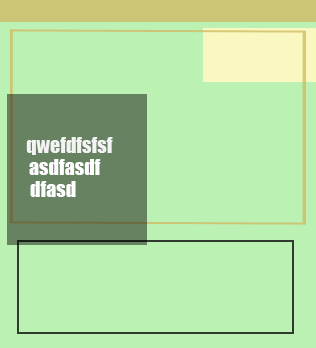
<style>
.page{position:relative;width:316px;height:348px;background:#bcf1b4}
.page>*{position:absolute;margin:0}
.t1{font:20px "Impact";color:#f3f3f3}
.t2{font:20px "Impact";color:#ffffff}
</style>
<div class="page">
<p class="t1" style="left:26px;top:137px;width:87px;height:18px">qwefdfsfsf</p>
<p class="t2" style="left:29px;top:159px;width:72px;height:16px">asdfasdf</p>
<p class="t2" style="left:30px;top:181px;width:46px;height:16px">dfasd</p>
</div>
